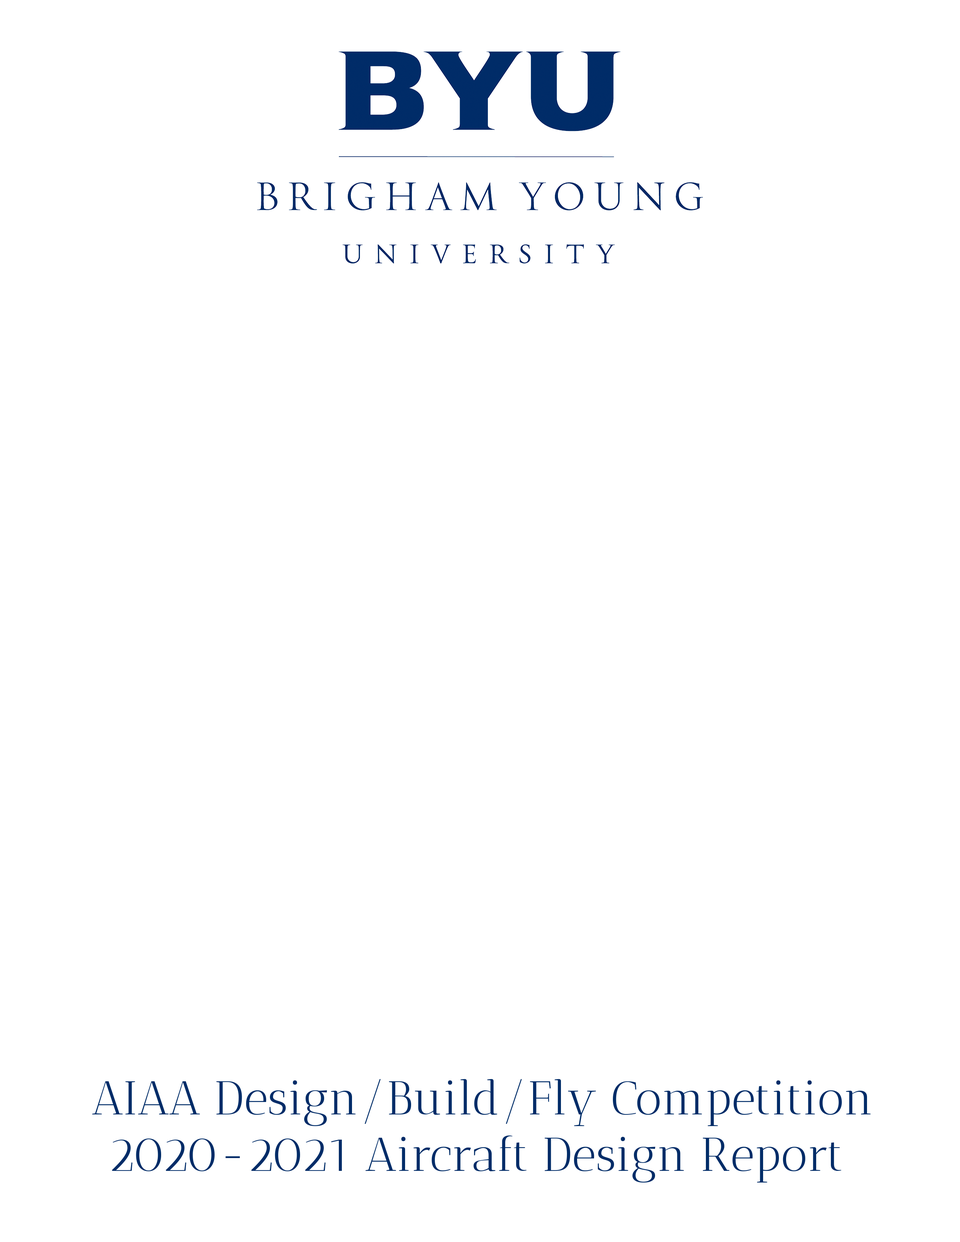
<style>
.page{position:relative;width:960px;height:1242px;background:#ffffff}
.page>*{position:absolute;margin:0}
.t1{font:47.1px "AnticDidone-Regular";color:#002c68}
</style>
<div class="page">
<p class="t1" style="left:92px;top:1079px;width:779px;height:104px;text-align:center">AIAA Design/Build/Fly Competition<br>2020-2021 Aircraft Design Report</p>
</div>
